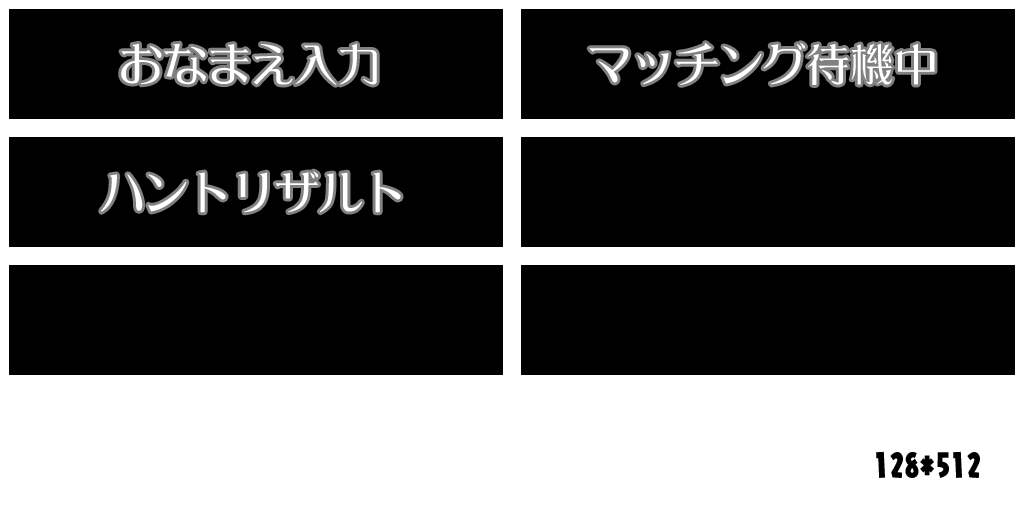
<style>
.page{position:relative;width:1024px;height:512px;background:#000000}
.page>*{position:absolute;margin:0}
.t1{font:43.8px "DFLeiGaSo-W5-WIN-RKSJ-H";color:#ffffff}
.t2{font:30.8px "NIS-JYA-U-83pv-RKSJ-H";color:#000000}
</style>
<div class="page">
<p class="t1" style="left:121px;top:43px;width:256px;height:42px">おなまえ入力</p>
<p class="t1" style="left:589px;top:43px;width:346px;height:42px">マッチング待機中</p>
<p class="t1" style="left:101px;top:171px;width:300px;height:42px">ハントリザルト</p>
<p class="t2" style="left:876px;top:451px;width:104px;height:27px">128*512</p>
</div>
